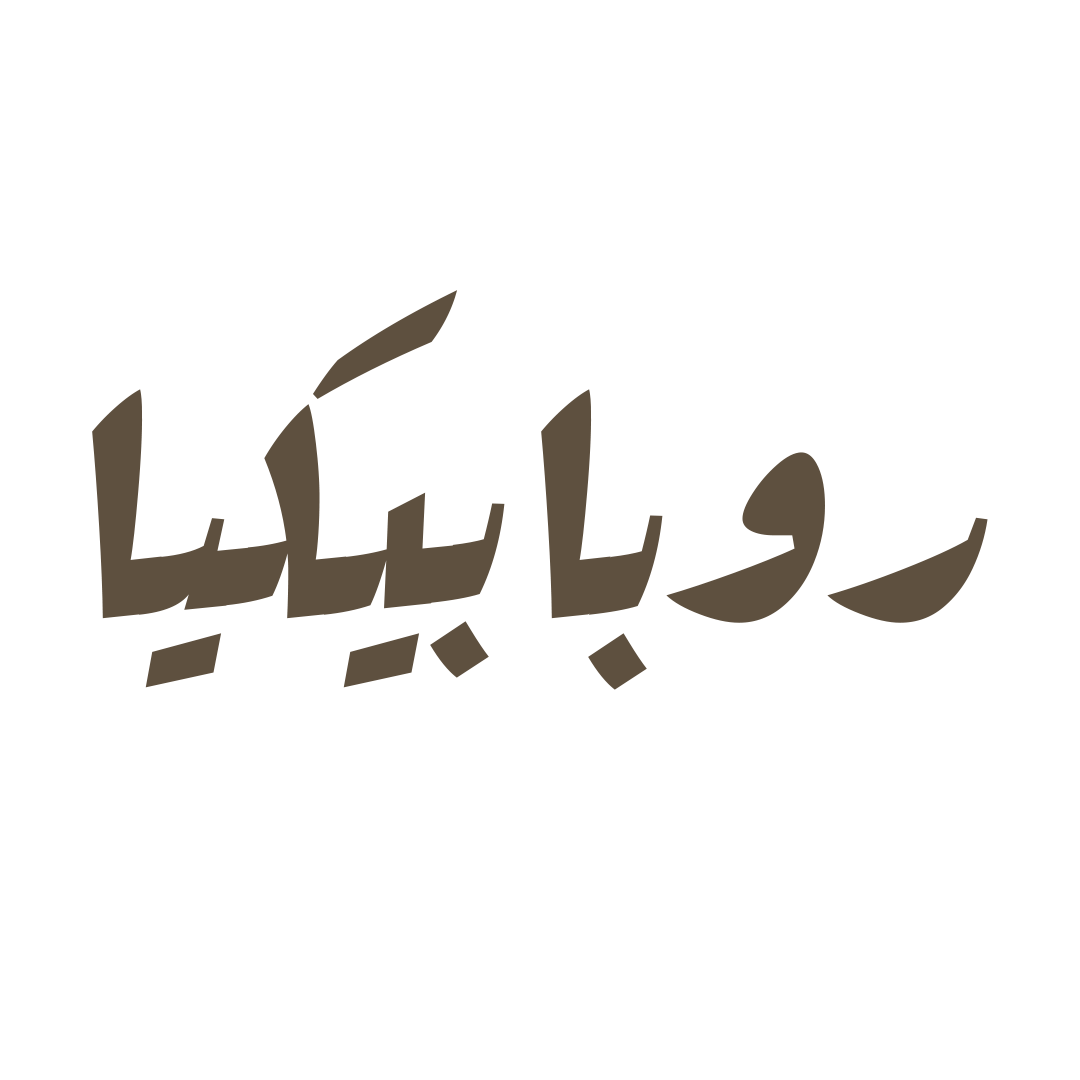
<style>
.page{position:relative;width:1080px;height:1080px;background:#ffffff}
.page>*{position:absolute;margin:0}
.t1{font:380px "Rakkas-Regular";color:#5e503f}
</style>
<div class="page">
<p class="t1" style="left:92px;top:290px;width:896px;height:400px">روبابيكيا</p>
</div>
